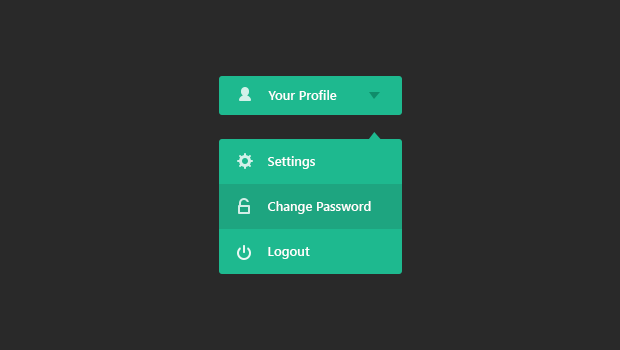
<style>
.page{position:relative;width:620px;height:350px;background:#292929}
.page>*{position:absolute;margin:0}
.t1{font:13px "SegoeUI-Semibold";color:#ffffff}
.t2{font:13px/45px "SegoeUI-Semibold";color:#ffffff}
</style>
<div class="page">
<p class="t1" style="left:268px;top:90px;width:69px;height:10px">Your Profile</p>
<p class="t2" style="left:268px;top:156px;width:103px;height:103px">Settings<br>Change Password<br>Logout</p>
</div>
